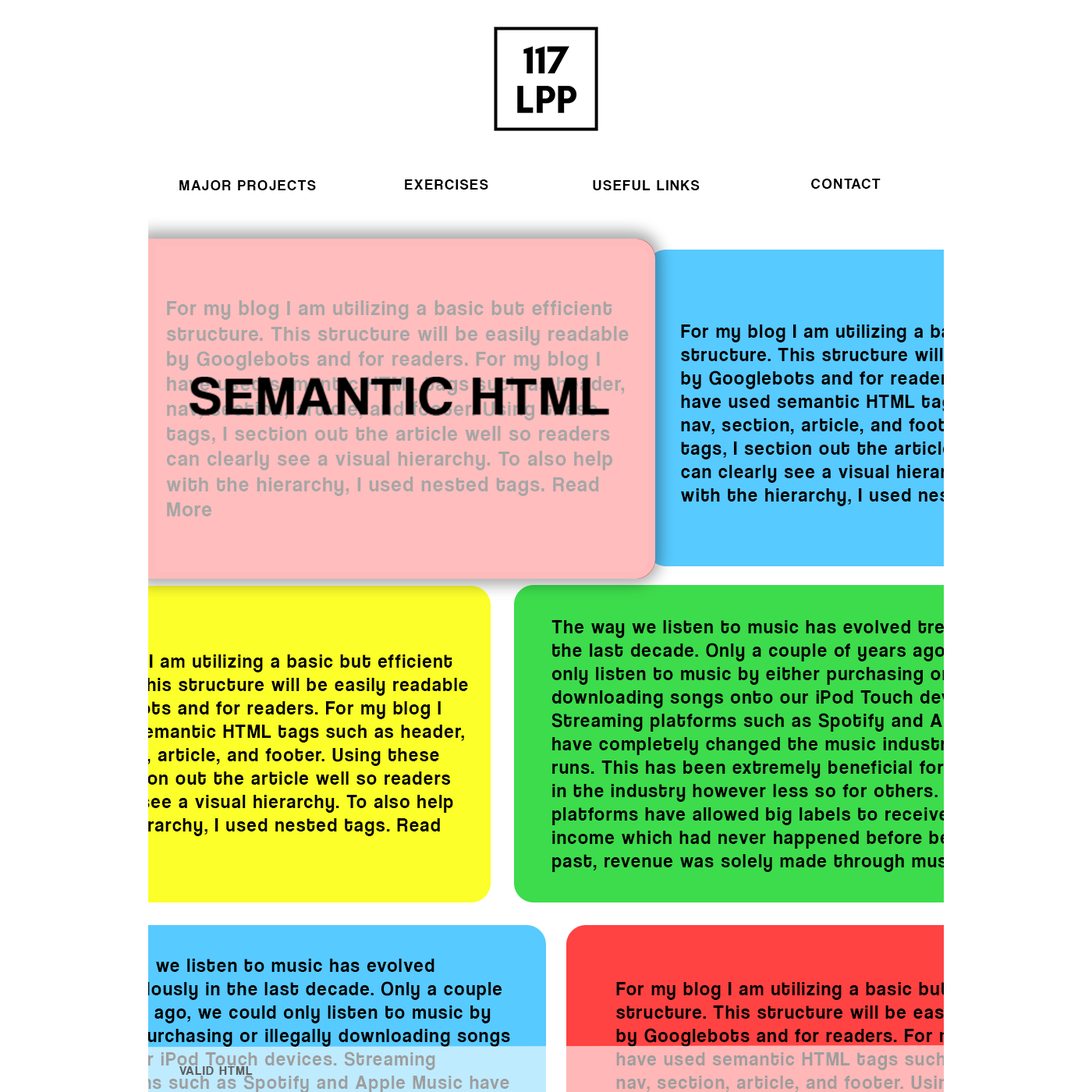
<style>
.page{position:relative;width:1092px;height:1092px;background:#ffffff}
.page>*{position:absolute;margin:0}
.t1{font:15.2px "CoolveticaRg-Regular";letter-spacing:0.1em;color:#000000}
.t2{font:21.1px/25.1px "CoolveticaRg-Regular";letter-spacing:0.075em;color:#a6a6a6;scale:0.95 1}
.t3{font:19.7px/23.4px "CoolveticaRg-Regular";letter-spacing:0.075em;color:#000000;scale:0.95 1}
.t4{font:12.5px "CoolveticaRg-Regular";letter-spacing:0.1em;color:#5f5e5e}
</style>
<div class="page">
<p class="t1" style="left:179px;top:180px;width:137px;height:10px">MAJOR PROJECTS</p>
<p class="t1" style="left:405px;top:179px;width:83px;height:11px">EXERCISES</p>
<p class="t1" style="left:593px;top:180px;width:107px;height:10px">USEFUL LINKS</p>
<p class="t1" style="left:811px;top:179px;width:70px;height:10px">CONTACT</p>
<p class="t2" style="left:166px;top:300px;width:463px;height:216px">For my blog I am utilizing a basic but efficient structure. This structure will be easily readable by Googlebots and for readers. For my blog I have used semantic HTML tags such as header, nav, section, article, and footer. Using these tags, I section out the article well so readers can clearly see a visual hierarchy. To also help with the hierarchy, I used nested tags. Read More</p>
<p class="t3" style="left:551px;top:620px;width:519px;height:252px">The way we listen to music has evolved tremendously in the last decade. Only a couple of years ago, we could only listen to music by either purchasing or illegally downloading songs onto our iPod Touch devices. Streaming platforms such as Spotify and Apple Music have completely changed the music industry and how it runs. This has been extremely beneficial for some people in the industry however less so for others. Streaming platforms have allowed big labels to receive a steady income which had never happened before because, in the past, revenue was solely made through music sales. Read More</p>
<p class="t3" style="left:37px;top:654px;width:431px;height:182px">For my blog I am utilizing a basic but efficient structure. This structure will be easily readable by Googlebots and for readers. For my blog I have used semantic HTML tags such as header, nav, section, article, and footer. Using these tags, I section out the article well so readers can clearly see a visual hierarchy. To also help with the hierarchy, I used nested tags. Read More</p>
<p class="t4" style="left:179px;top:1066px;width:74px;height:9px">VALID HTML</p>
</div>
